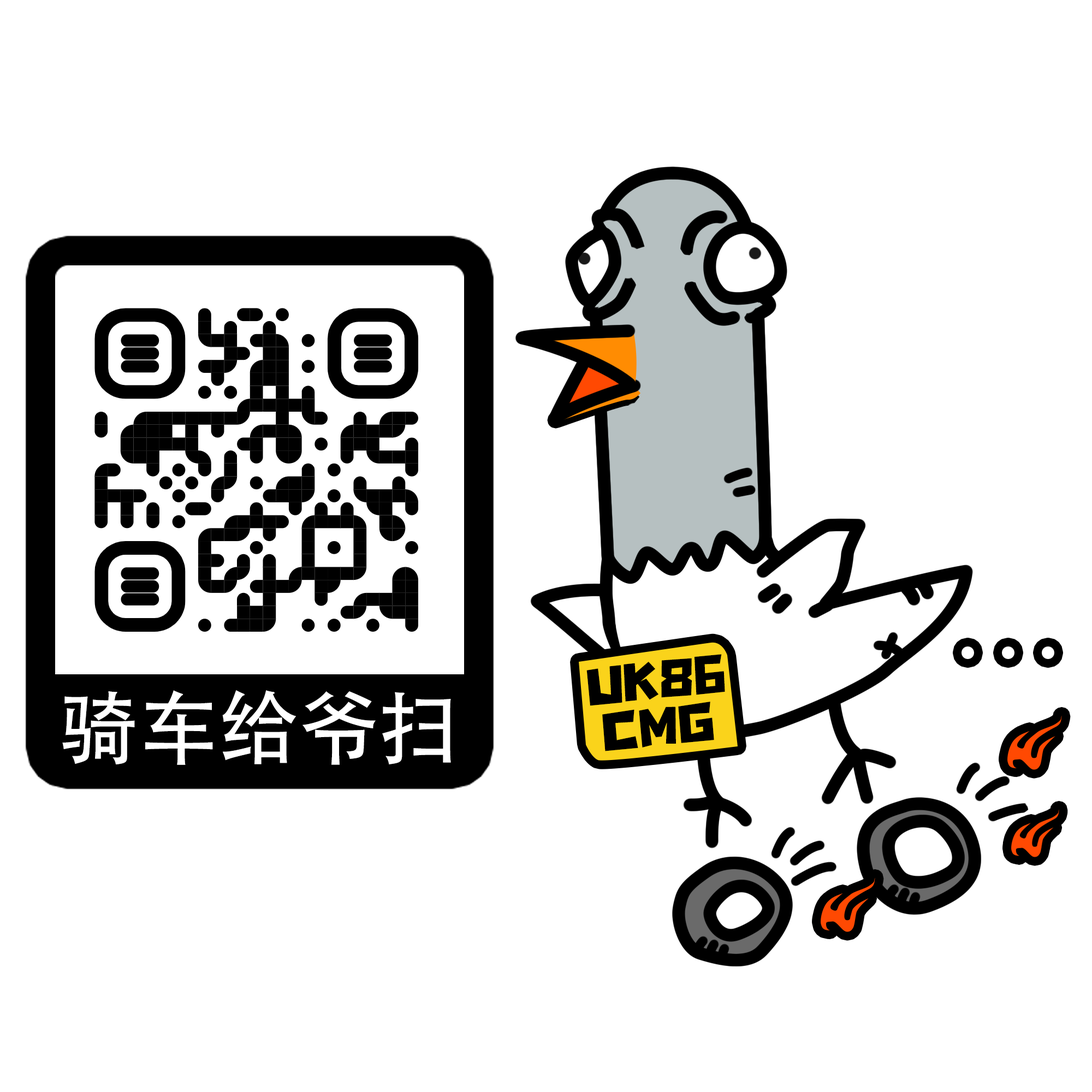
<style>
.page{position:relative;width:1092px;height:1092px;background:#ffffff}
.page>*{position:absolute;margin:0}
.t1{font:60.7px/46.9px "SSFangTangTi";color:#000000}
.t2{font:79.9px "AdobeHeitiStd-Regular";color:#ffffff}
</style>
<div class="page">
<p class="t1" style="left:586px;top:654px;width:139px;height:97px;text-align:center;rotate:-6deg">UK86<br>CMG</p>
<p class="t2" style="left:62px;top:690px;width:389px;height:75px">骑车给爷扫</p>
</div>
